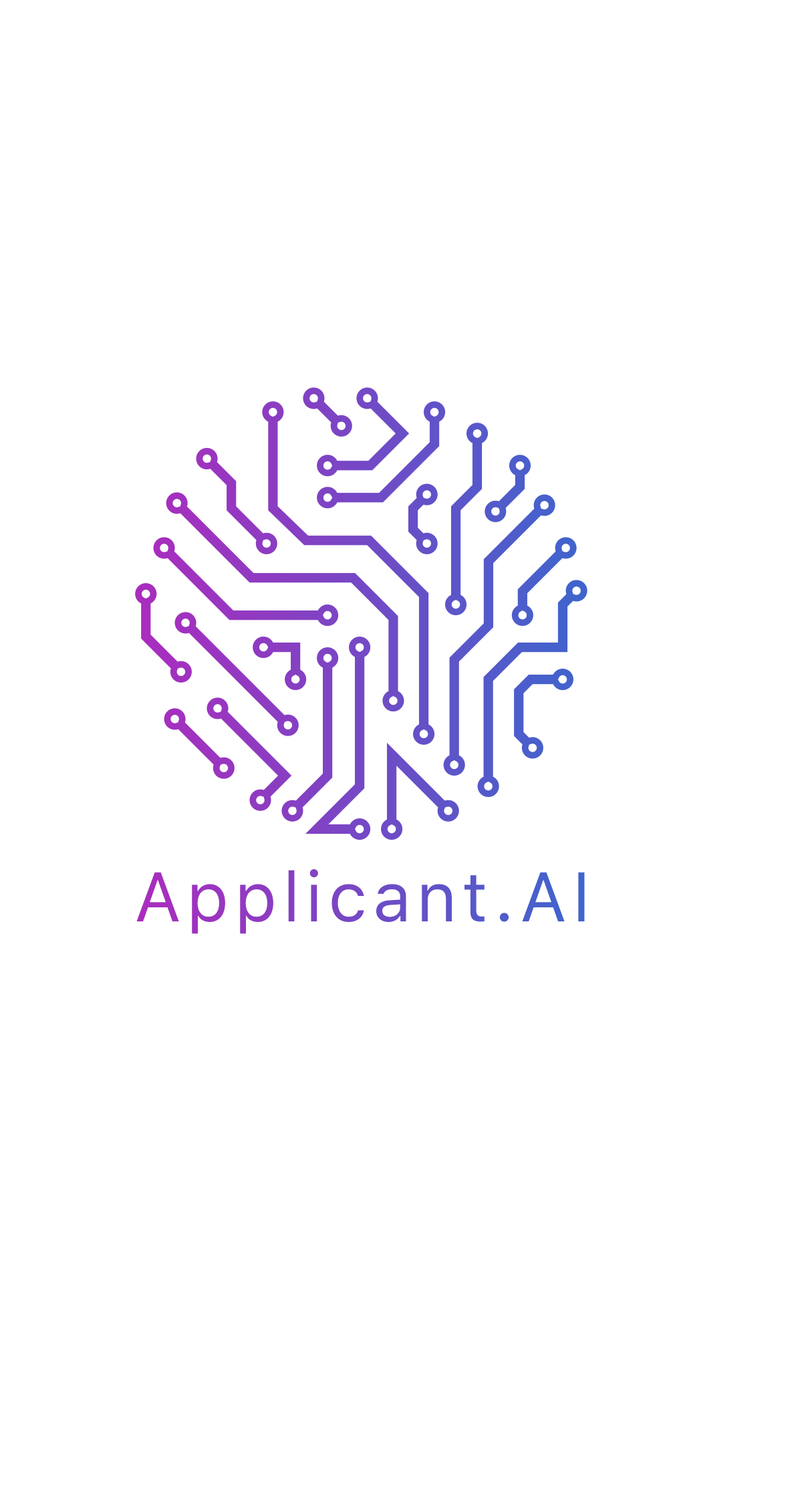
<style>
.page{position:relative;width:802px;height:1487px;background:#ffffff}
.page>*{position:absolute;margin:0}
.t1{font:69.5px "SFProText-Regular";letter-spacing:0.08em}
</style>
<div class="page">
<p class="t1" style="left:136px;top:868px;width:449px;height:66px">Applicant.AI</p>
</div>
